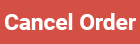
<style>
.page{position:relative;width:140px;height:44px;background:#d45044}
.page>*{position:absolute;margin:0}
.t1{font:21.7px "Roboto-Bold";color:#ffffff;scale:1.05 1}
</style>
<div class="page">
<p class="t1" style="left:5px;top:13px;width:131px;height:17px">Cancel Order</p>
</div>
